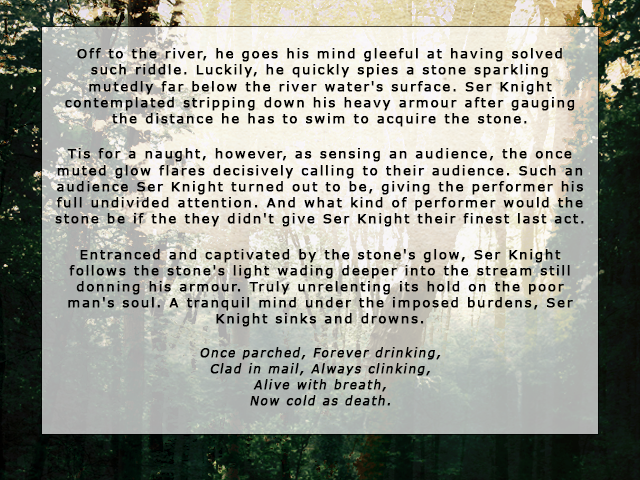
<style>
.page{position:relative;width:640px;height:480px}
.page>*{position:absolute;margin:0}
.t1{font:13.4px "Verdana";letter-spacing:0.1em;color:#000000;font-weight:bold}
.t2{font:12px "Verdana";letter-spacing:0.1em;color:#000000;font-weight:bold;font-style:italic}
</style>
<div class="page">
<p class="t1" style="left:55px;top:48px;width:529px;height:358px;text-align:center">Off to the river, he goes his mind gleeful at having solved such riddle. Luckily, he quickly spies a stone sparkling mutedly far below the river water's surface. Ser Knight contemplated stripping down his heavy armour after gauging the distance he has to swim to acquire the stone. <br><br>Tis for a naught, however, as sensing an audience, the once muted glow flares decisively calling to their audience. Such an audience Ser Knight turned out to be, giving the performer his full undivided attention. And what kind of performer would the stone be if the they didn't give Ser Knight their finest last act. <br><br>Entranced and captivated by the stone's glow, Ser Knight follows the stone's light wading deeper into the stream still donning his armour. Truly unrelenting its hold on the poor man's soul. A tranquil mind under the imposed burdens, Ser Knight sinks and drowns.<br><br><span class="t2">Once parched, Forever drinking,<br>Clad in mail, Always clinking,<br>Alive with breath,<br>Now cold as death.</span></p>
</div>
